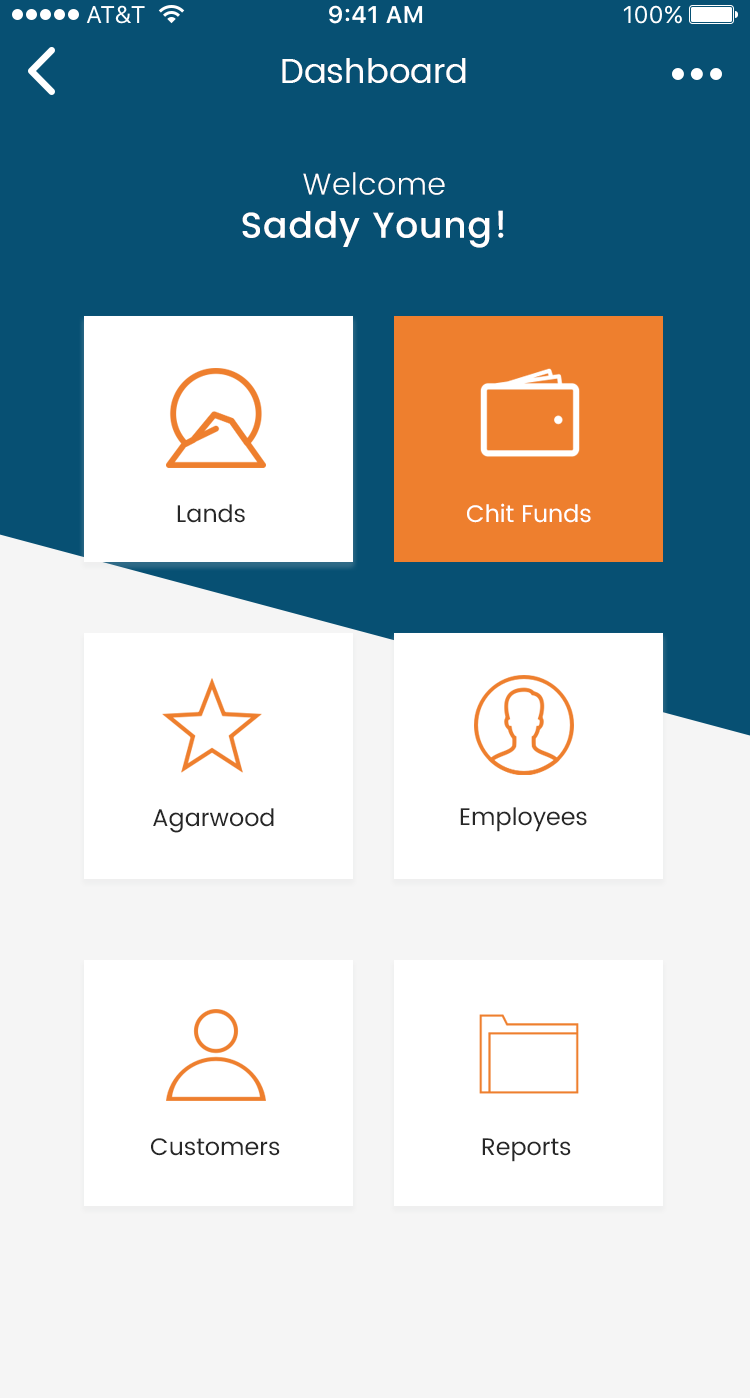
<style>
.page{position:relative;width:750px;height:1398px;background:#ffffff}
.page>*{position:absolute;margin:0}
.t1{font:34px "Poppins-Regular";color:#ffffff}
.t2{font:36px "Poppins-Medium";letter-spacing:0.025em;color:#ffffff}
.t3{font:30px "Poppins-Light";letter-spacing:0.025em;color:#ffffff}
.t4{font:24px "Poppins-Regular";color:#272727}
.t5{font:24px "Poppins-Regular";color:#ffffff}
</style>
<div class="page">
<p class="t1" style="left:282px;top:58px;width:184px;height:25px">Dashboard</p>
<p class="t2" style="left:242px;top:172px;width:262px;height:76px;text-align:center"><span class="t3">Welcome<br></span>Saddy Young!</p>
<p class="t4" style="left:177px;top:504px;width:68px;height:19px">Lands</p>
<p class="t5" style="left:467px;top:503px;width:124px;height:20px">Chit Funds</p>
<p class="t4" style="left:153px;top:808px;width:121px;height:25px">Agarwood</p>
<p class="t4" style="left:460px;top:807px;width:127px;height:25px">Employees</p>
<p class="t4" style="left:151px;top:1138px;width:129px;height:18px">Customers</p>
<p class="t4" style="left:482px;top:1138px;width:89px;height:24px">Reports</p>
</div>
